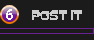
<style>
.page{position:relative;width:94px;height:40px;background:#1b1b1b}
.page>*{position:absolute;margin:0}
.t1{font:12px "Baveuse";color:#cccccc}
</style>
<div class="page">
<p class="t1" style="left:32px;top:10px;width:50px;height:10px">Post it</p>
</div>
